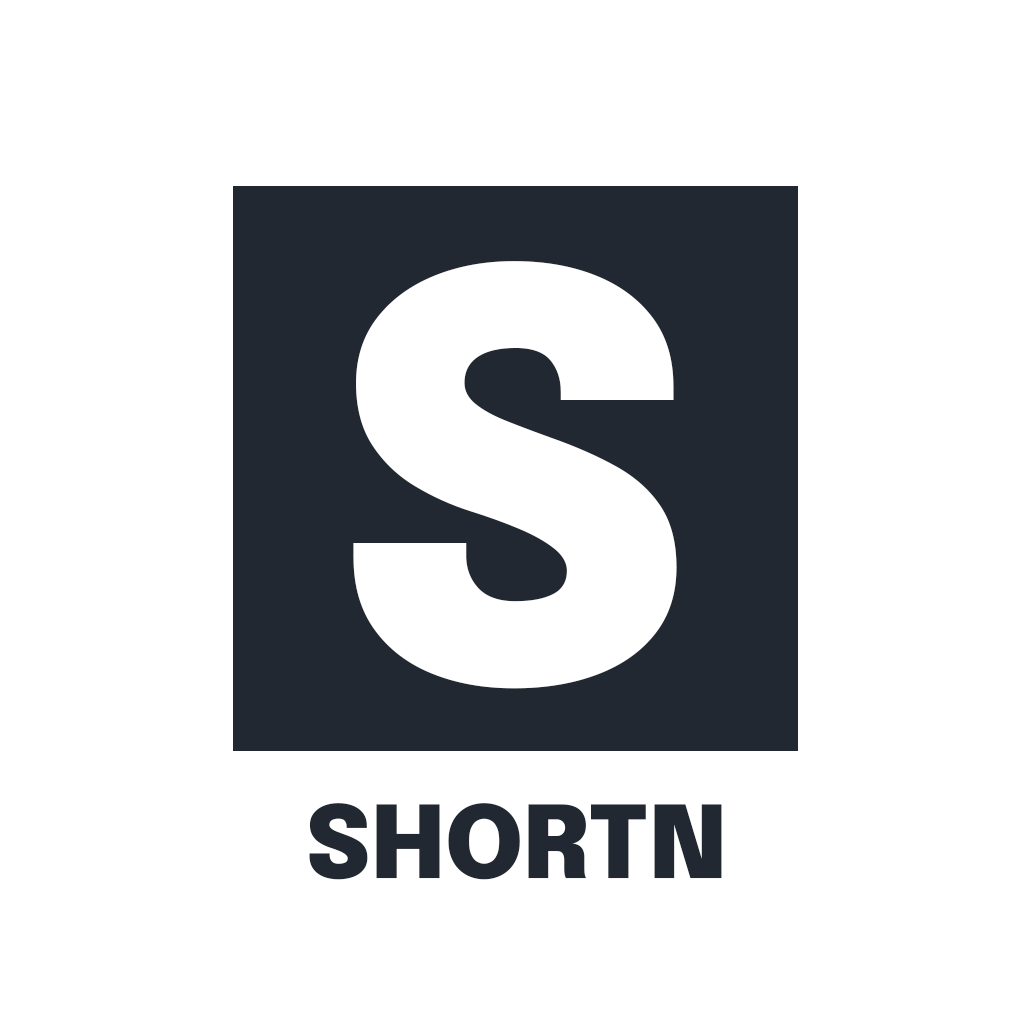
<style>
.page{position:relative;width:1024px;height:1024px;background:#ffffff}
.page>*{position:absolute;margin:0}
.t1{font:559.8px "Epilogue-Black";color:#fefefe}
.t2{font:99.8px "Epilogue-Black";color:#222831}
</style>
<div class="page">
<p class="t1" style="left:353px;top:261px;width:324px;height:428px">S</p>
<p class="t2" style="left:309px;top:803px;width:413px;height:77px">SHORTN</p>
</div>
